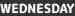
<style>
.page{position:relative;width:75px;height:16px;background:#333333}
.page>*{position:absolute;margin:0}
.t1{font:12.5px "RoundedMplus1c-ExtraBold";color:#ffffff}
</style>
<div class="page">
<p class="t1" style="left:0px;top:3px;width:75px;height:11px">WEDNESDAY</p>
</div>
